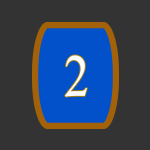
<style>
.page{position:relative;width:150px;height:150px;background:#333333}
.page>*{position:absolute;margin:0}
.t1{font:62.5px "TimesNewRomanPSMT";letter-spacing:0.1em;color:#ffffff;scale:0.75 1}
</style>
<div class="page">
<p class="t1" style="left:65px;top:55px;width:22px;height:42px">2</p>
</div>
